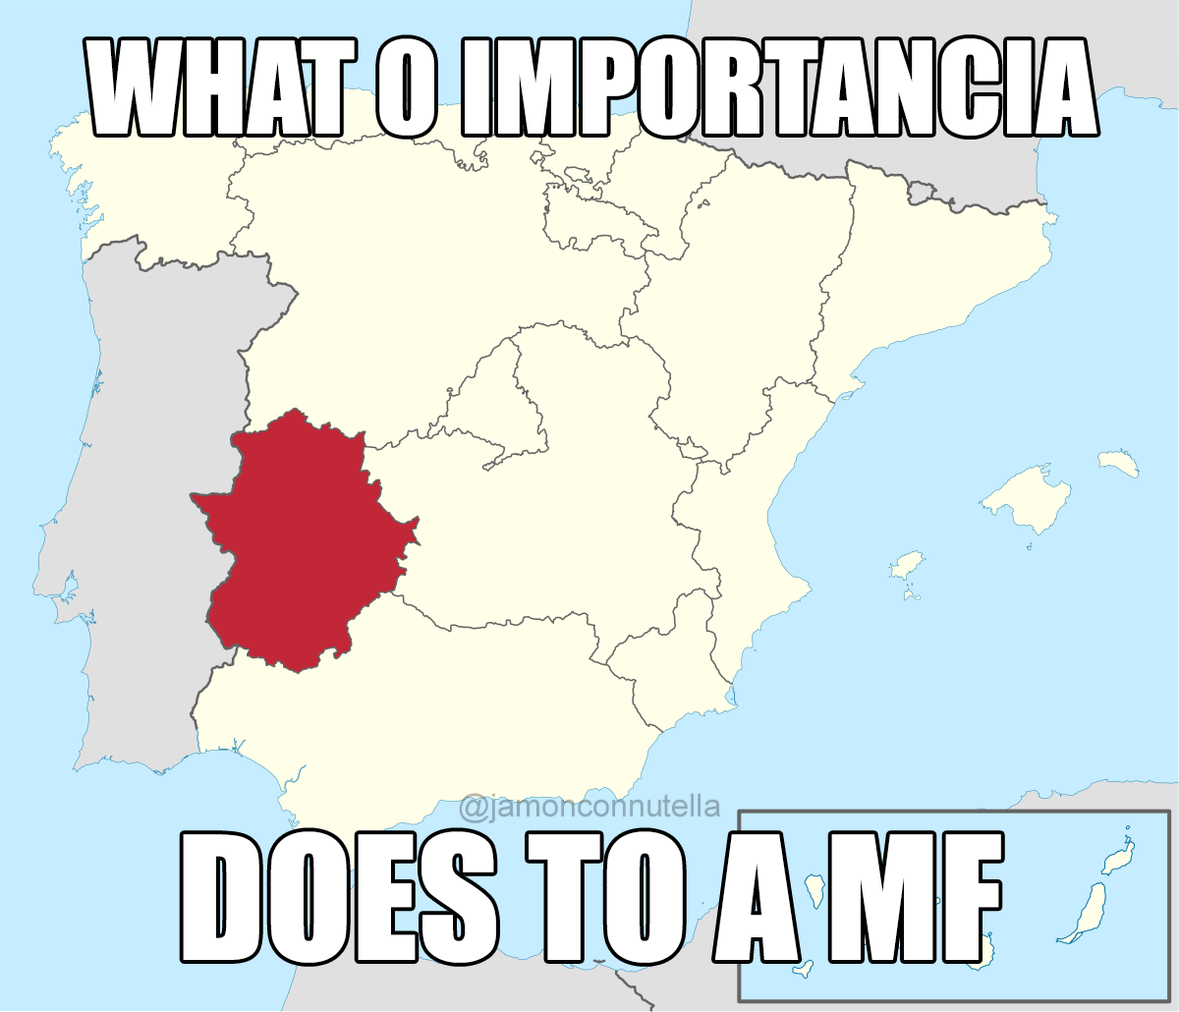
<style>
.page{position:relative;width:1179px;height:1012px;background:#c6ecff}
.page>*{position:absolute;margin:0}
.t1{font:117.6px "Impact";color:#ffffff}
.t2{font:31.6px "ArialMT";color:#8fabb8}
.t3{font:158.9px "Impact";color:#ffffff}
</style>
<div class="page">
<p class="t1" style="left:85px;top:38px;width:1012px;height:98px">WHAT 0 IMPORTANCIA</p>
<p class="t2" style="left:459px;top:793px;width:261px;height:30px">@jamonconnutella</p>
<p class="t3" style="left:183px;top:831px;width:818px;height:132px">DOES TO A MF</p>
</div>
